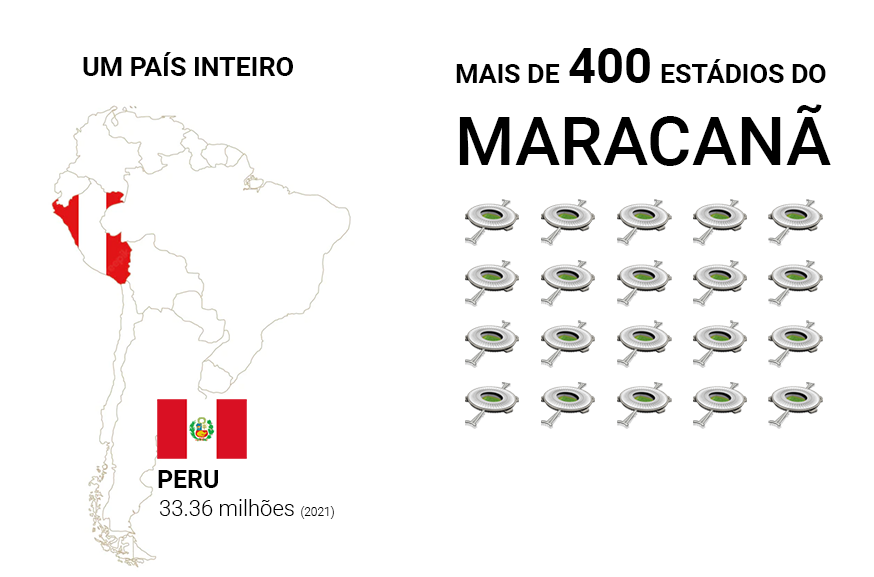
<style>
.page{position:relative;width:874px;height:577px;background:#ffffff}
.page>*{position:absolute;margin:0}
.t1{font:26.7px "Roboto-Bold";color:#000000}
.t2{font:48.9px "Roboto-Bold";color:#000000}
.t3{font:68px "Roboto-Medium";color:#000000}
.t4{font:24.8px "Roboto-Bold";color:#000000}
.t5{font:22.1px "Roboto-Light";color:#000000}
.t6{font:12px "Roboto-Light";color:#000000}
</style>
<div class="page">
<p class="t1" style="left:83px;top:52px;width:210px;height:24px">UM PAÍS INTEIRO</p>
<p class="t1" style="left:456px;top:48px;width:375px;height:118px">MAIS DE <span class="t2">400 </span>ESTÁDIOS DO <br><span class="t3">MARACANÃ</span></p>
<p class="t4" style="left:158px;top:470px;width:60px;height:18px">PERU</p>
<p class="t5" style="left:159px;top:499px;width:175px;height:20px">33.36 milhões <span class="t6">(2021)</span></p>
</div>
